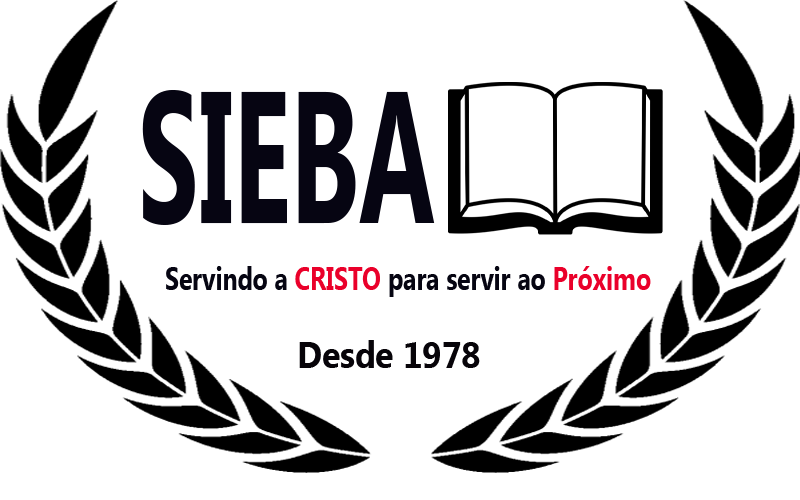
<style>
.page{position:relative;width:800px;height:500px;background:#ffffff}
.page>*{position:absolute;margin:0}
.t1{font:186.8px "MyanmarText-Bold";color:#060512;scale:0.58 1}
.t2{font:32px "MyanmarText-Bold";color:#060512;scale:0.77 1}
.t3{font:32px "MyanmarText-Bold";color:#ea002a;scale:0.77 1}
.t4{font:36.6px "MyanmarText-Bold";color:#070409;scale:0.92 1}
</style>
<div class="page">
<p class="t1" style="left:142px;top:89px;width:293px;height:136px">SIEBA</p>
<p class="t2" style="left:166px;top:266px;width:485px;height:31px">Servindo a <span class="t3">CRISTO </span>para servir ao <span class="t3">Próximo</span></p>
<p class="t4" style="left:299px;top:340px;width:181px;height:28px">Desde 1978</p>
</div>
